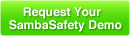
<style>
.page{position:relative;width:130px;height:36px}
.page>*{position:absolute;margin:0}
.t1{font:12px/13px "Helvetica-Bold";letter-spacing:0.005em;color:#ffffff}
</style>
<div class="page">
<p class="t1" style="left:9px;top:7px;width:113px;height:25px;text-align:center">Request Your  <br>SambaSafety Demo</p>
</div>
